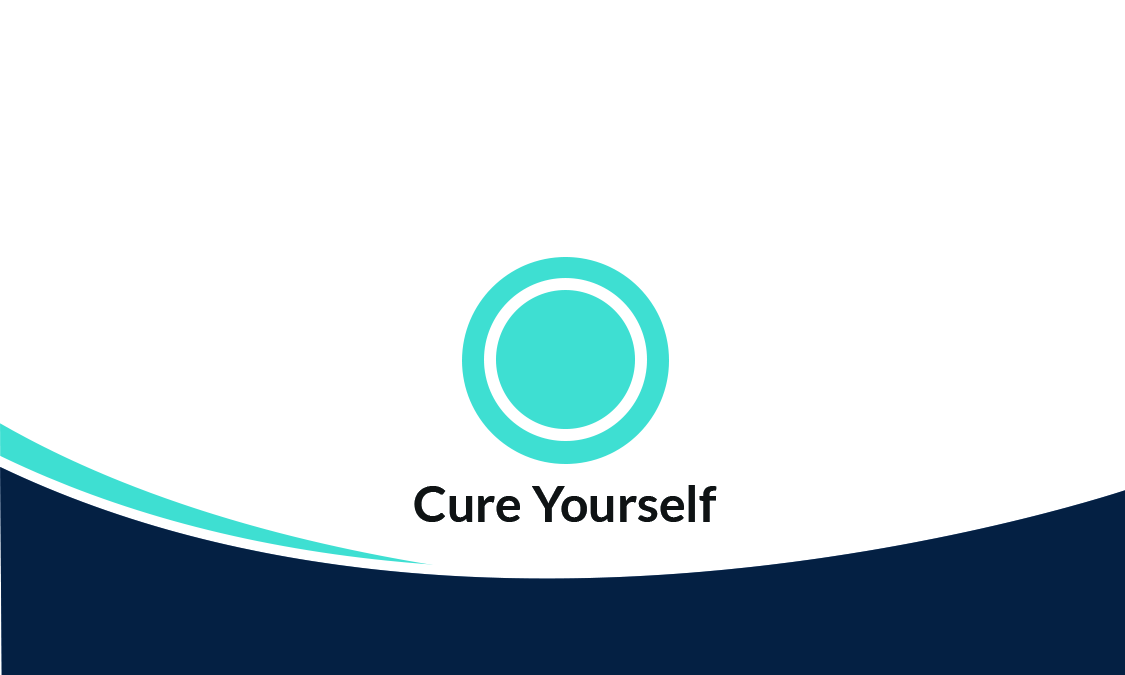
<style>
.page{position:relative;width:1125px;height:675px;background:#ffffff}
.page>*{position:absolute;margin:0}
.t1{font:49.8px "Lato-Bold";color:#0f1314}
</style>
<div class="page">
<p class="t1" style="left:414px;top:485px;width:303px;height:37px">Cure Yourself</p>
</div>
